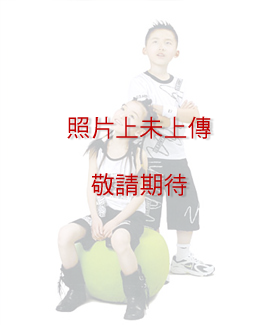
<style>
.page{position:relative;width:270px;height:325px;background:#ffffff}
.page>*{position:absolute;margin:0}
.t1{font:24.2px/57.1px "DFHei-Md-HKP-BF";color:#c20000}
</style>
<div class="page">
<p class="t1" style="left:67px;top:116px;width:144px;height:80px;text-align:center">照片上未上傳<br>敬請期待</p>
</div>
